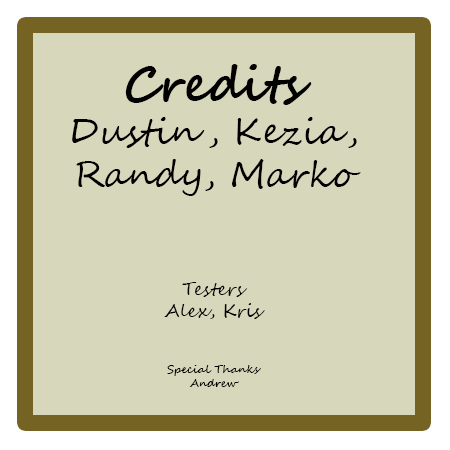
<style>
.page{position:relative;width:450px;height:450px;background:#d7d7bb}
.page>*{position:absolute;margin:0}
.t1{font:36px "SegoeScript";color:#000000}
.t2{font:48px "SegoeScript-Bold";color:#000000}
.t3{font:18px "SegoeScript";color:#000000}
.t4{font:11px "SegoeScript";color:#000000}
</style>
<div class="page">
<p class="t1" style="left:72px;top:64px;width:289px;height:323px;text-align:center"><span class="t2">Credits<br></span>Dustin, Kezia,<br>Randy, Marko<br><br><br><span class="t3">Testers<br>Alex, Kris<br><br><br></span><span class="t4">Special Thanks<br>Andrew</span></p>
</div>
